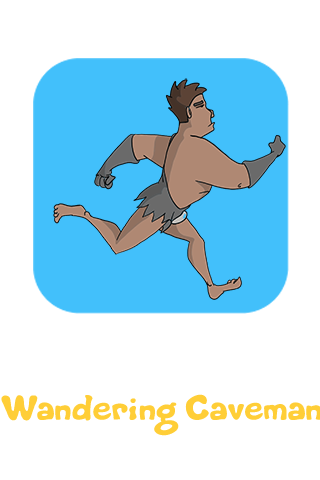
<style>
.page{position:relative;width:320px;height:480px;background:#ffffff}
.page>*{position:absolute;margin:0}
.t1{font:54px "Life-is-goofy";color:#ffce37;scale:1.11 1}
</style>
<div class="page">
<p class="t1" style="left:1px;top:394px;width:321px;height:42px">Wandering Caveman</p>
</div>
